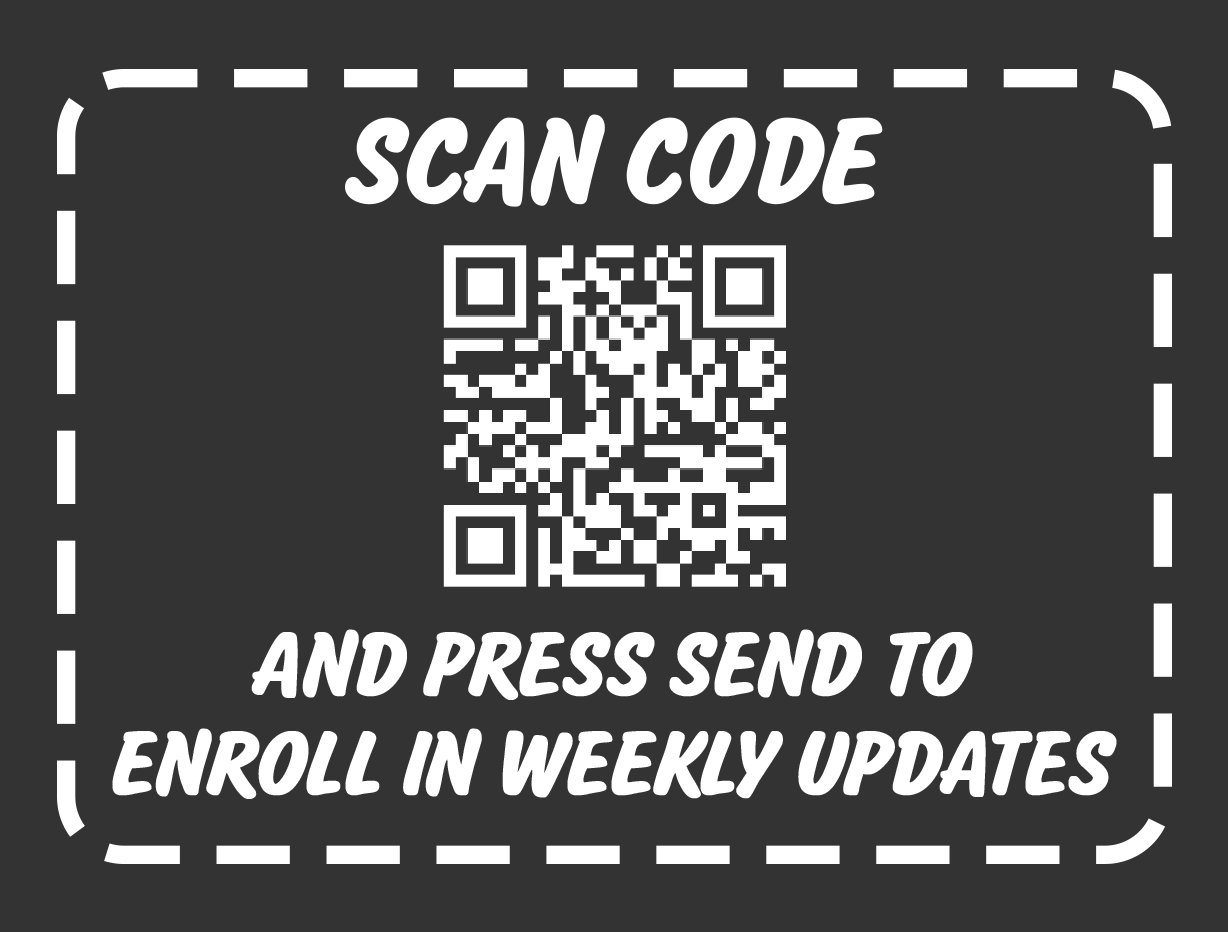
<style>
.page{position:relative;width:1228px;height:932px;background:#333333}
.page>*{position:absolute;margin:0}
.t1{font:108.3px "Salsbury-Regular";letter-spacing:-0.02em;color:#ffffff;font-weight:bold}
.t2{font:82.1px "Salsbury-Regular";letter-spacing:-0.02em;color:#ffffff;font-weight:bold}
</style>
<div class="page">
<p class="t1" style="left:345px;top:114px;width:538px;height:93px">SCAN CODE</p>
<p class="t2" style="left:112px;top:629px;width:1005px;height:170px;text-align:center">AND PRESS SEND TO<br>ENROLL IN WEEKLY UPDATES</p>
</div>
